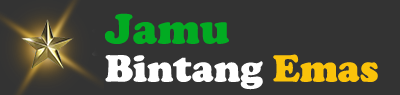
<style>
.page{position:relative;width:400px;height:95px;background:#333333}
.page>*{position:absolute;margin:0}
.t1{font:43.7px "CooperBlack";color:#02ab22}
.t2{font:39.2px "CooperBlack";color:#ffffff}
.t3{font:39.2px "CooperBlack";color:#fac20a}
</style>
<div class="page">
<p class="t1" style="left:104px;top:13px;width:125px;height:31px">Jamu</p>
<p class="t2" style="left:105px;top:54px;width:273px;height:36px">Bintang<span class="t3"> Emas</span></p>
</div>
